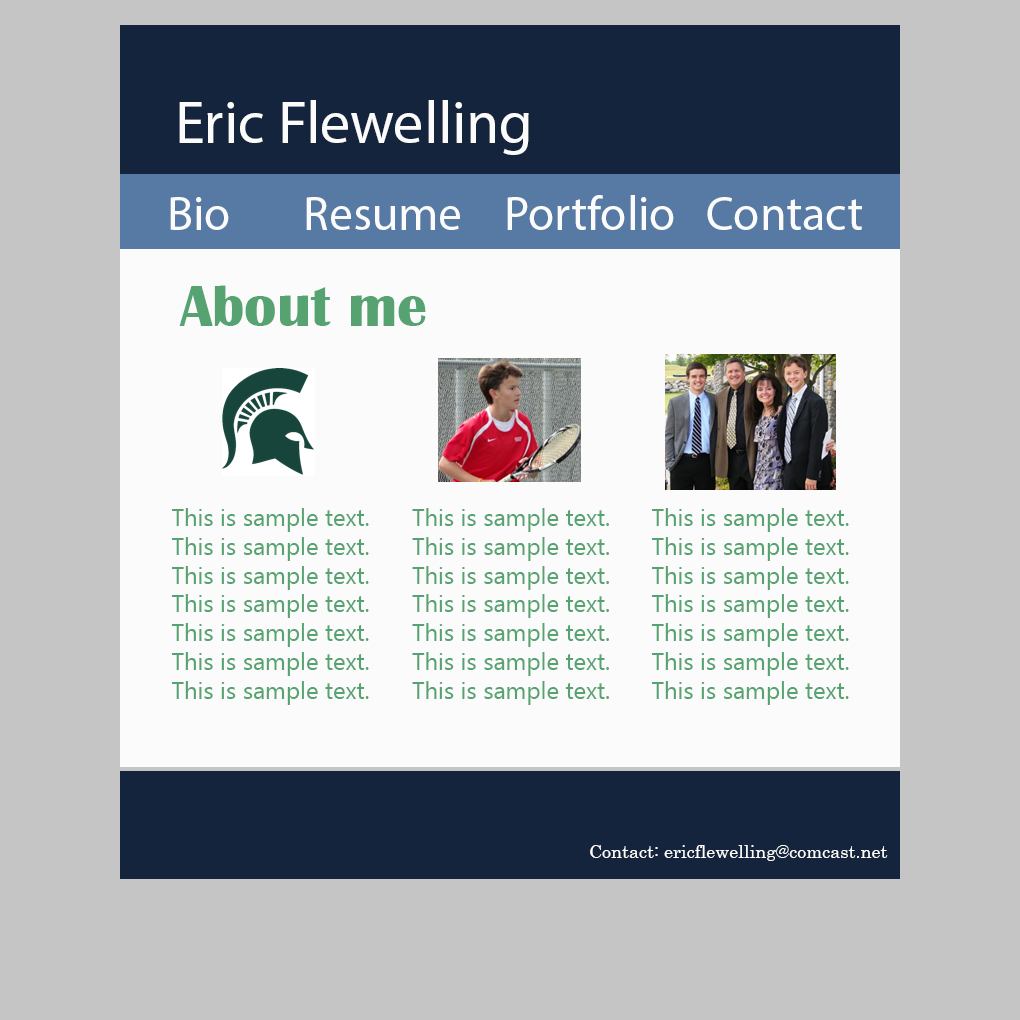
<style>
.page{position:relative;width:1020px;height:1020px;background:#c5c5c5}
.page>*{position:absolute;margin:0}
.t1{font:60px "MyriadPro-Regular";color:#fbfbfb}
.t2{font:48px "MyriadPro-Regular";color:#fbfbfb}
.t3{font:60px "BritannicBold";color:#56a371}
.t4{font:24px "NirmalaUI";color:#56a371}
.t5{font:18px "Century";color:#fffefe}
</style>
<div class="page">
<p class="t1" style="left:179px;top:100px;width:350px;height:55px">Eric Flewelling</p>
<p class="t2" style="left:170px;top:197px;width:59px;height:33px">Bio</p>
<p class="t2" style="left:306px;top:197px;width:154px;height:33px">Resume</p>
<p class="t2" style="left:507px;top:195px;width:167px;height:35px">Portfolio</p>
<p class="t2" style="left:707px;top:197px;width:155px;height:33px">Contact</p>
<p class="t3" style="left:179px;top:285px;width:247px;height:41px">About me</p>
<p class="t4" style="left:171px;top:508px;width:198px;height:197px">This is sample text.<br>This is sample text.<br>This is sample text.<br>This is sample text.<br>This is sample text.<br>This is sample text.<br>This is sample text.</p>
<p class="t4" style="left:412px;top:508px;width:197px;height:197px">This is sample text.<br>This is sample text.<br>This is sample text.<br>This is sample text.<br>This is sample text.<br>This is sample text.<br>This is sample text.</p>
<p class="t4" style="left:651px;top:508px;width:198px;height:197px">This is sample text.<br>This is sample text.<br>This is sample text.<br>This is sample text.<br>This is sample text.<br>This is sample text.<br>This is sample text.</p>
<p class="t5" style="left:590px;top:845px;width:298px;height:16px">Contact: ericflewelling@comcast.net</p>
</div>
